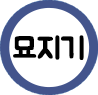
<style>
.page{position:relative;width:98px;height:95px;background:#ffffff}
.page>*{position:absolute;margin:0}
.t1{font:30px "BMJUA";color:#000000}
</style>
<div class="page">
<p class="t1" style="left:13px;top:35px;width:71px;height:25px">묘지기</p>
</div>
